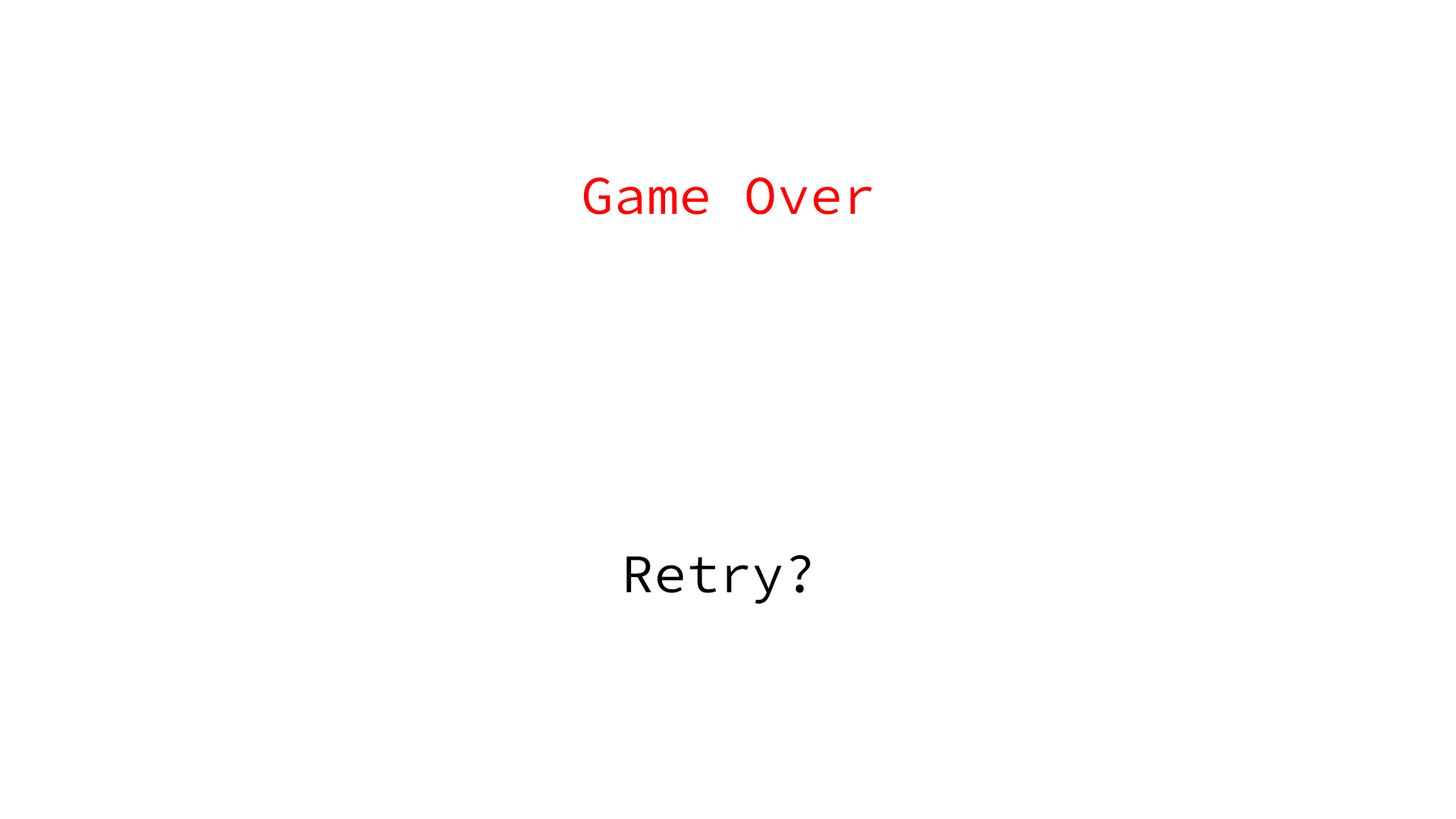
<style>
.page{position:relative;width:1456px;height:819px;background:#ffffff}
.page>*{position:absolute;margin:0}
.t1{font:54.6px "SourceCodeVariable-Roman";color:#ff0000}
.t2{font:54.6px "SourceCodeVariable-Roman";color:#000000}
</style>
<div class="page">
<p class="t1" style="left:583px;top:177px;width:289px;height:38px">Game Over</p>
<p class="t2" style="left:626px;top:555px;width:185px;height:49px">Retry?</p>
</div>
